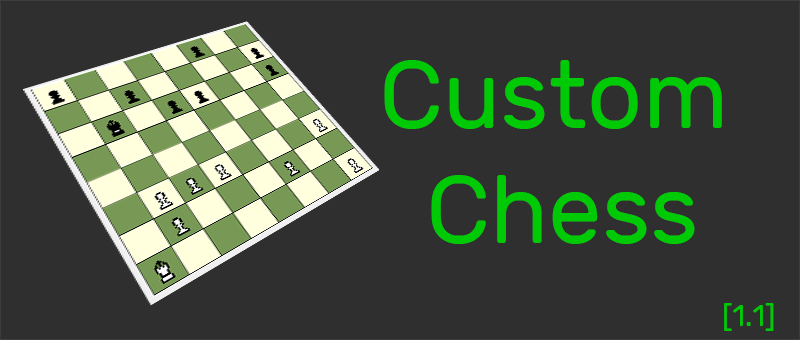
<style>
.page{position:relative;width:800px;height:340px;background:#2f2f2f}
.page>*{position:absolute;margin:0}
.t1{font:96px "Rubik-Regular";color:#00ca06}
.t2{font:30px "Rubik-Regular";color:#00ca06}
</style>
<div class="page">
<p class="t1" style="left:384px;top:60px;width:338px;height:184px">Custom<br>  Chess</p>
<p class="t2" style="left:724px;top:303px;width:50px;height:28px">[1.1]</p>
</div>
